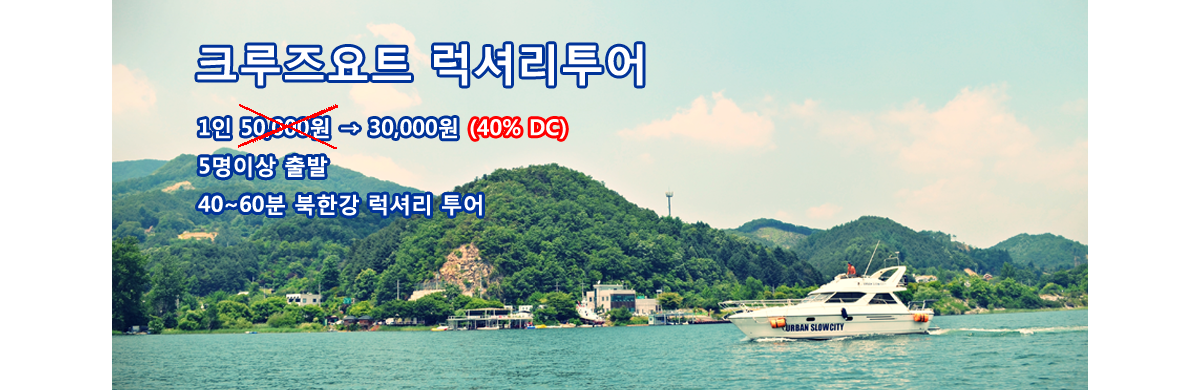
<style>
.page{position:relative;width:1200px;height:390px;background:#ffffff}
.page>*{position:absolute;margin:0}
.t1{font:43.8px "MalgunGothicBold";color:#ffffff}
.t2{font:21.9px "MalgunGothicBold";color:#ffffff}
.t3{font:21.9px "MalgunGothicBold";color:#fefefe}
.t4{font:21.9px "MalgunGothicBold";color:#fe0000}
</style>
<div class="page">
<p class="t1" style="left:197px;top:44px;width:446px;height:42px">크루즈요트 럭셔리투어</p>
<p class="t2" style="left:198px;top:118px;width:284px;height:98px">1인 50,000원 → 30,000원<br>5명이상 출발<br>40~60분 북한강 럭셔리 투어</p>
<p class="t3" style="left:470px;top:119px;width:96px;height:20px">(40% DC)</p>
<p class="t2" style="left:198px;top:156px;width:284px;height:60px"><span class="t4"><br></span>5명이상 출발<br>40~60분 북한강 럭셔리 투어</p>
</div>
